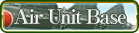
<style>
.page{position:relative;width:139px;height:33px}
.page>*{position:absolute;margin:0}
.t1{font:20px "RyuminPro-ExBold";letter-spacing:-0.08em}
</style>
<div class="page">
<p class="t1" style="left:14px;top:9px;width:112px;height:15px">Air Unit Base</p>
</div>
